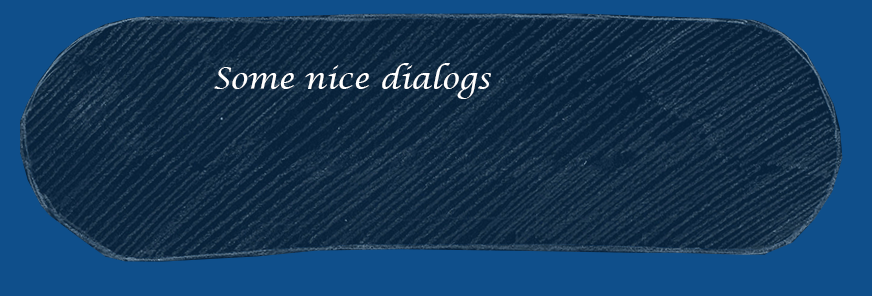
<style>
.page{position:relative;width:872px;height:296px;background:#0f4f8b}
.page>*{position:absolute;margin:0}
.t1{font:30px "LucidaCalligraphy-Italic";color:#fefefe}
</style>
<div class="page">
<p class="t1" style="left:214px;top:63px;width:277px;height:36px">Some nice dialogs</p>
</div>
